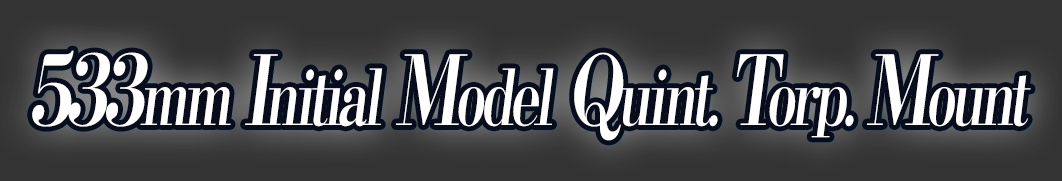
<style>
.page{position:relative;width:1062px;height:181px;background:#333333}
.page>*{position:absolute;margin:0}
.t1{font:76.8px "KochoStd-Heavy";letter-spacing:-0.08em;color:#ffffff;font-style:italic;scale:0.72 1}
.t2{font:96px "KochoStd-Heavy";letter-spacing:-0.08em;color:#ffffff;font-style:italic;scale:0.72 1}
</style>
<div class="page">
<p class="t1" style="left:32px;top:50px;width:999px;height:91px"><span class="t2">533</span>mm<span class="t2"> I</span>nitial<span class="t2"> M</span>odel<span class="t2"> Q</span>uint. <span class="t2">T</span>orp. <span class="t2">M</span>ount</p>
</div>
